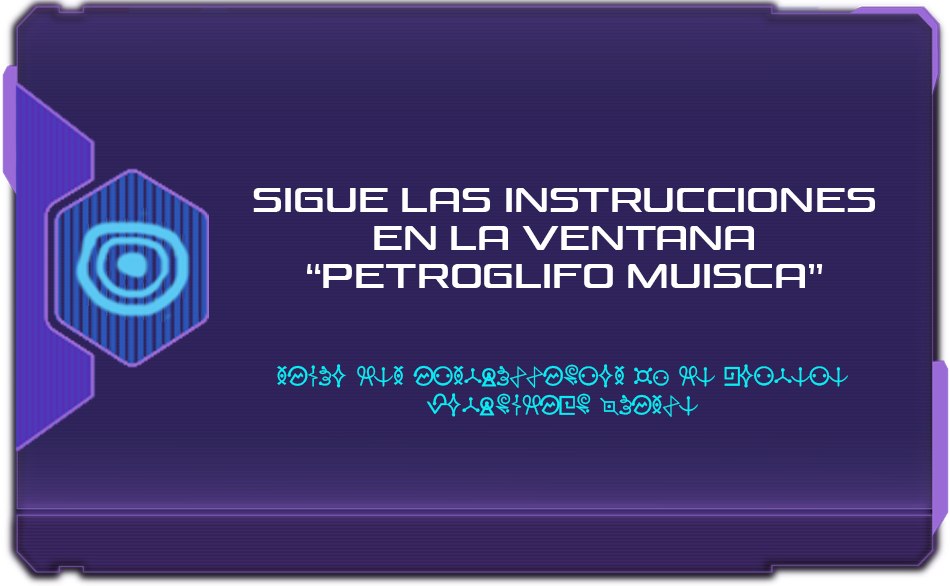
<style>
.page{position:relative;width:950px;height:586px}
.page>*{position:absolute;margin:0}
.t1{font:32px "VenusRisingRg-Regular";color:#ffffff}
.t2{font:24px "Futurama-Alien-Alphabet-One-Regular";letter-spacing:-0.1em;color:#04eff8}
</style>
<div class="page">
<p class="t1" style="left:253px;top:188px;width:622px;height:100px;text-align:center">SIGUE LAS INSTRUCCIONES en LA VENTANA<br>“PETROGLIFO MUISCA”</p>
<p class="t2" style="left:277px;top:364px;width:571px;height:53px;text-align:center">SIGUE LAS INSTRUCCIONES Dn LA VENTANA<br>PETROGLIFO MUISCA</p>
</div>
